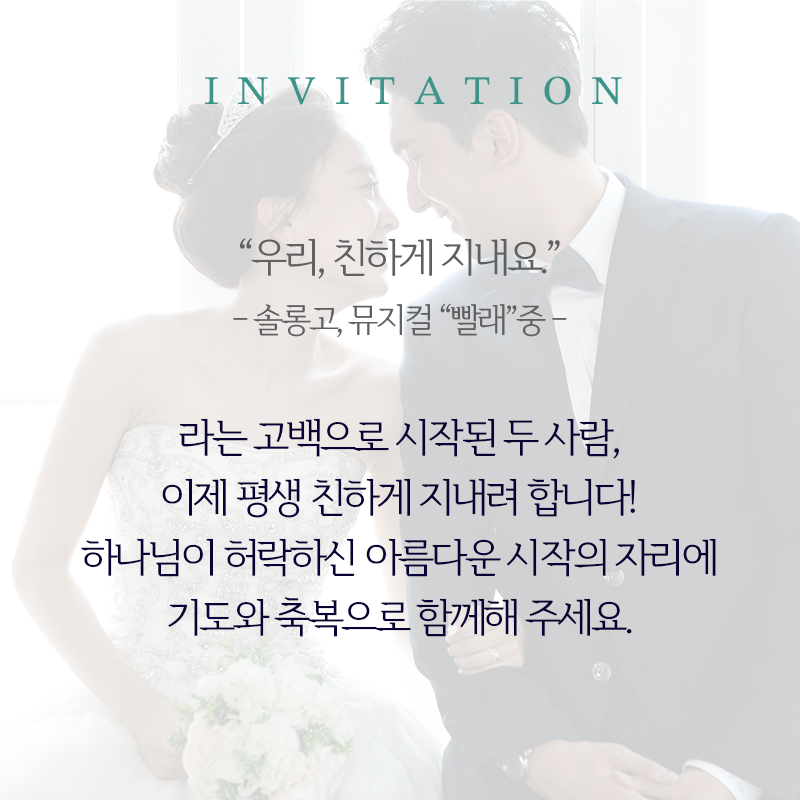
<style>
.page{position:relative;width:800px;height:800px}
.page>*{position:absolute;margin:0}
.t1{font:46.7px "JCkg";letter-spacing:-0.05em;color:#3c948b}
.t2{font:40px/60px "Daehan";letter-spacing:-0.075em;color:#080235}
.t3{font:40px/60px "Daehan";letter-spacing:-0.075em;color:#606063}
.t4{font:33.3px/60px "Daehan";letter-spacing:-0.075em;color:#606063}
</style>
<div class="page">
<p class="t1" style="left:205px;top:76px;width:417px;height:29px">I N V I T A T I O N</p>
<p class="t2" style="left:81px;top:238px;width:635px;height:399px;text-align:center"><span class="t3">“우리, 친하게 지내요.”<br></span><span class="t4">- 솔롱고, 뮤지컬 “빨래”중 -<br><br></span>라는 고백으로 시작된 두 사람,<br>이제 평생 친하게 지내려 합니다!<br>하나님이 허락하신 아름다운 시작의 자리에<br>기도와 축복으로 함께해 주세요.</p>
</div>
